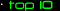
<style>
.page{position:relative;width:60px;height:11px;background:#000000}
.page>*{position:absolute;margin:0}
.t1{font:14px "NeuropolMedium";color:#00ff00}
</style>
<div class="page">
<p class="t1" style="left:9px;top:0px;width:44px;height:11px">top 10</p>
</div>
